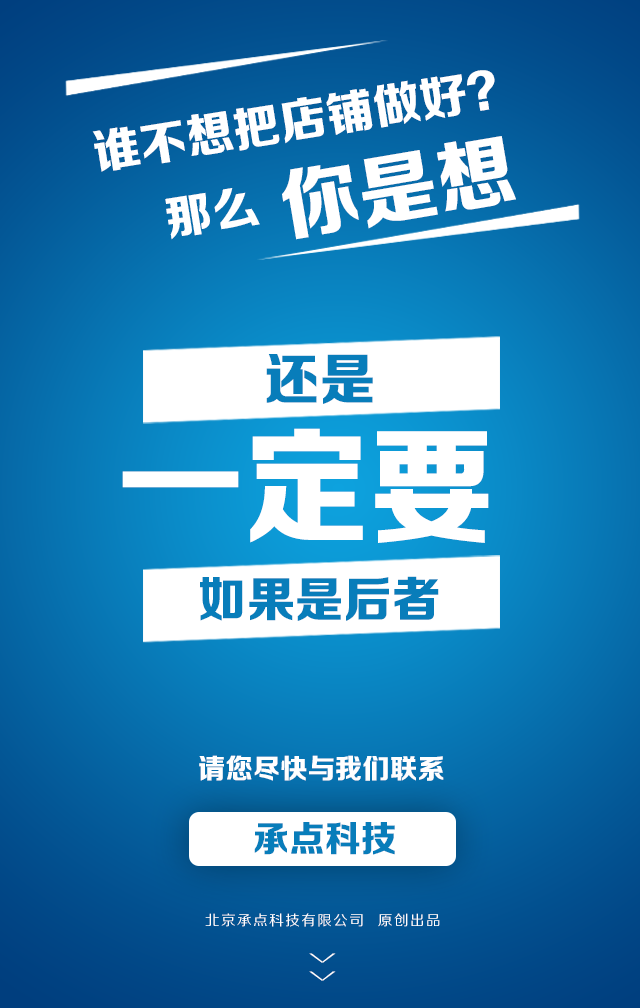
<style>
.page{position:relative;width:640px;height:1008px}
.page>*{position:absolute;margin:0}
.t1{font:47px "FZZDHJW--GB1-0";letter-spacing:0.005em;color:#ffffff;text-transform:uppercase}
.t2{font:78.3px "FZZDHJW--GB1-0";letter-spacing:0.005em;color:#ffffff;text-transform:uppercase}
.t3{font:46.8px "FZZDHJW--GB1-0";letter-spacing:0.005em;color:#ffffff;text-transform:uppercase}
.t4{font:56.1px "FZZDHJW--GB1-0";letter-spacing:0.005em;color:#087dba;text-transform:uppercase}
.t5{font:126.3px "FZZDHJW--GB1-0";letter-spacing:0.005em;color:#ffffff;text-transform:uppercase}
.t6{font:48.8px "FZZDHJW--GB1-0";letter-spacing:0.005em;color:#087dba;text-transform:uppercase}
.t7{font:27.6px "FZZDHJW--GB1-0";letter-spacing:0.005em;color:#ffffff;text-transform:uppercase}
.t8{font:36px "FZZDHJW--GB1-0";letter-spacing:0.005em;color:#087dba;text-transform:uppercase}
.t9{font:14.2px "FZZHJW--GB1-0";letter-spacing:0.1em;color:#ffffff;text-transform:uppercase}
.t10{font:36.8px "FZZXHJW--GB1-0";letter-spacing:0.5em;color:#ffffff;text-transform:uppercase;scale:0.44 1}
</style>
<div class="page">
<p class="t1" style="left:92px;top:70px;width:403px;height:102px;rotate:-9deg">谁不想把店铺做好？</p>
<p class="t2" style="left:282px;top:136px;width:234px;height:104px;rotate:-10deg">你是想</p>
<p class="t3" style="left:165px;top:188px;width:95px;height:52px;rotate:-9deg">那么</p>
<p class="t4" style="left:266px;top:354px;width:107px;height:50px">还是</p>
<p class="t5" style="left:122px;top:428px;width:367px;height:115px">一定要</p>
<p class="t6" style="left:200px;top:576px;width:239px;height:45px">如果是后者</p>
<p class="t7" style="left:199px;top:755px;width:245px;height:26px">请您尽快与我们联系</p>
<p class="t8" style="left:254px;top:822px;width:141px;height:33px">承点科技</p>
<p class="t9" style="left:205px;top:913px;width:235px;height:14px">北京承点科技有限公司  原创出品</p>
<p class="t10" style="left:309px;top:953px;width:27px;height:28px;rotate:90deg">&gt;&gt;</p>
</div>
